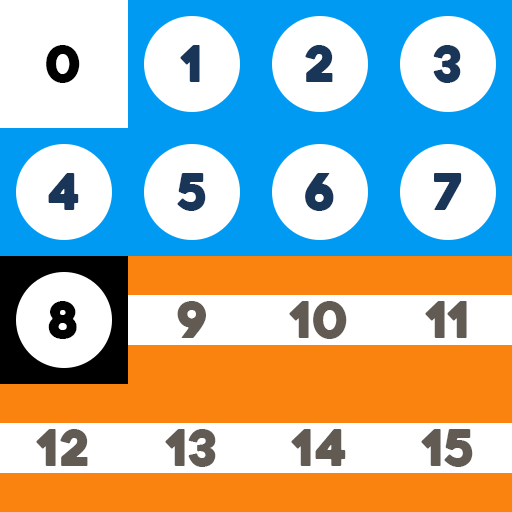
<style>
.page{position:relative;width:512px;height:512px;background:#ffffff}
.page>*{position:absolute;margin:0}
.t1{font:50px "Heavitas";color:#000000}
.t2{font:50px "Heavitas";color:#193658}
.t3{font:50px "Heavitas";color:#625b54}
</style>
<div class="page">
<p class="t1" style="left:46px;top:45px;width:34px;height:38px">0</p>
<p class="t2" style="left:180px;top:45px;width:20px;height:37px">1</p>
<p class="t2" style="left:305px;top:45px;width:28px;height:37px">2</p>
<p class="t2" style="left:433px;top:45px;width:28px;height:38px">3</p>
<p class="t2" style="left:48px;top:173px;width:31px;height:37px">4</p>
<p class="t2" style="left:177px;top:173px;width:29px;height:38px">5</p>
<p class="t2" style="left:305px;top:173px;width:29px;height:38px">6</p>
<p class="t2" style="left:434px;top:173px;width:28px;height:37px">7</p>
<p class="t1" style="left:48px;top:301px;width:29px;height:38px">8</p>
<p class="t3" style="left:177px;top:301px;width:29px;height:37px">9</p>
<p class="t3" style="left:289px;top:301px;width:58px;height:38px">10</p>
<p class="t3" style="left:425px;top:301px;width:42px;height:37px">11</p>
<p class="t3" style="left:36px;top:429px;width:52px;height:37px">12</p>
<p class="t3" style="left:165px;top:429px;width:51px;height:38px">13</p>
<p class="t3" style="left:291px;top:429px;width:55px;height:37px">14</p>
<p class="t3" style="left:421px;top:429px;width:52px;height:38px">15</p>
</div>
